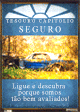
<style>
.page{position:relative;width:80px;height:112px}
.page>*{position:absolute;margin:0}
.t1{font:5.1px "TimesNewRomanPSMT";letter-spacing:0.28em;text-transform:uppercase;scale:0.9 1}
.t2{font:8.6px "TimesNewRomanPSMT";letter-spacing:0.26em;color:#ffffff;text-transform:uppercase;scale:0.92 1}
.t3{font:7.2px/6.5px "TimesNewRomanPSMT";letter-spacing:0.06em;scale:0.95 1}
</style>
<div class="page">
<p class="t1" style="left:6px;top:19px;width:68px;height:4px">tesouro capitolio</p>
<p class="t2" style="left:19px;top:26px;width:42px;height:7px">seguro</p>
<p class="t3" style="left:11px;top:83px;width:58px;height:18px;text-align:center">Ligue e descubra <br>porque somos<br> tão bem avaliados!</p>
</div>
